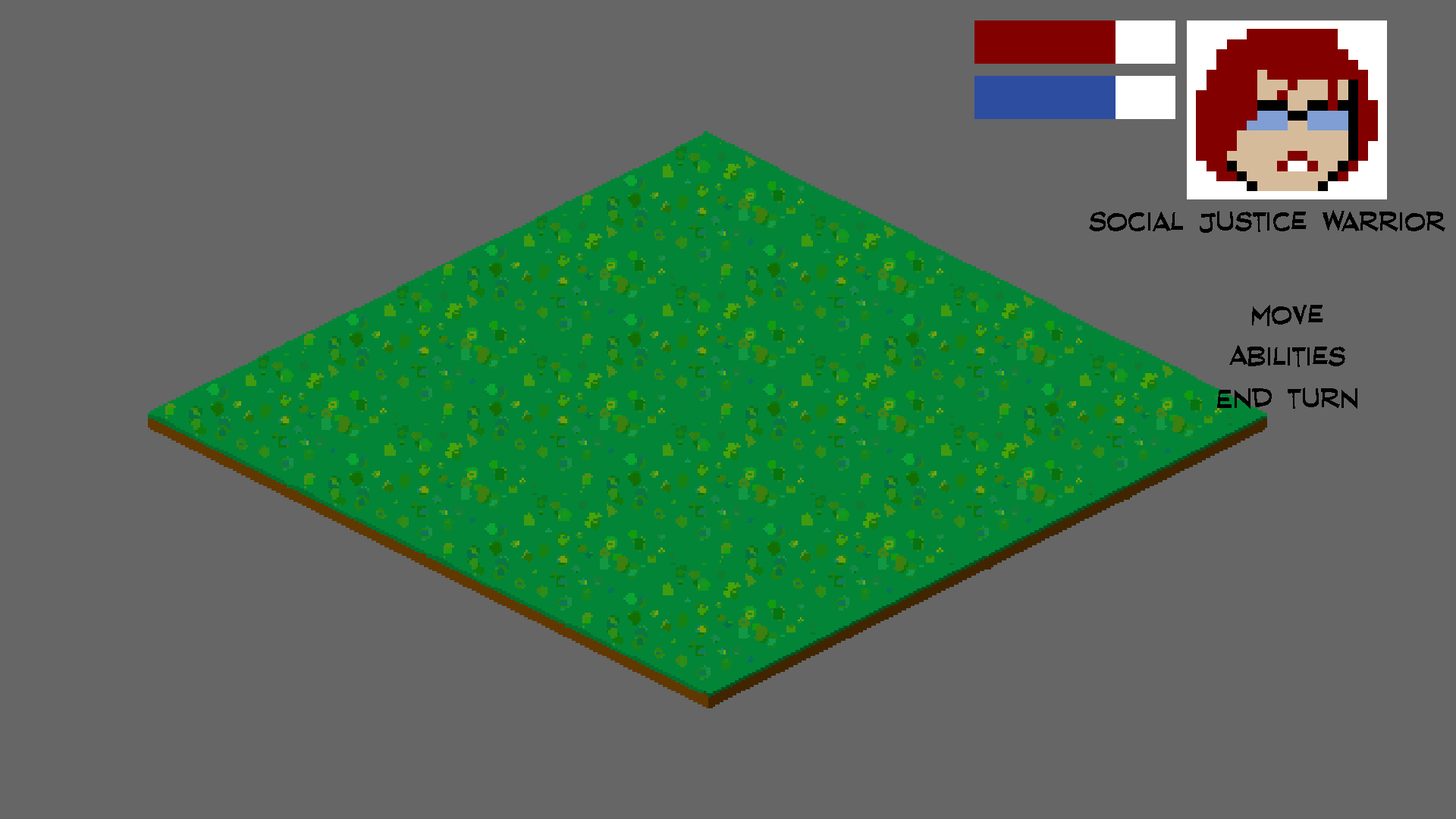
<style>
.page{position:relative;width:1456px;height:819px;background:#666666}
.page>*{position:absolute;margin:0}
.t1{font:36.4px "RedStateBlueStateBB";color:#000000}
</style>
<div class="page">
<p class="t1" style="left:1089px;top:210px;width:356px;height:23px">Social Justice Warrior</p>
<p class="t1" style="left:1252px;top:305px;width:71px;height:21px">Move</p>
<p class="t1" style="left:1229px;top:345px;width:116px;height:22px">Abilities</p>
<p class="t1" style="left:1217px;top:388px;width:140px;height:21px">End turn</p>
</div>
